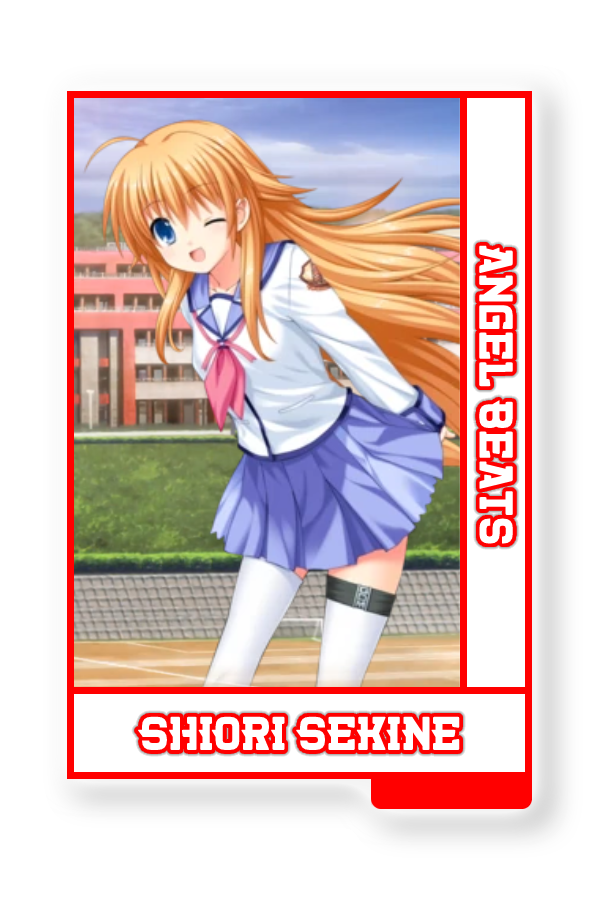
<style>
.page{position:relative;width:600px;height:900px;background:#ffffff}
.page>*{position:absolute;margin:0}
.t1{font:48.8px "KillerCollege";color:#ffffff}
.t2{font:48.6px "KillerCollege";color:#ffffff}
</style>
<div class="page">
<p class="t1" style="left:479px;top:245px;width:34px;height:299px;rotate:90deg">Angel Beats</p>
<p class="t2" style="left:137px;top:716px;width:323px;height:35px">SHIORI SEKINE</p>
</div>
